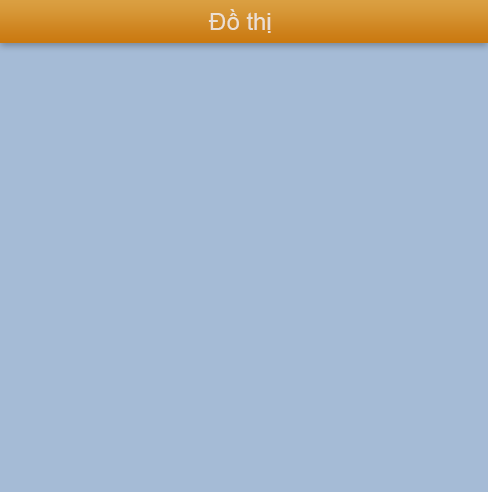
<style>
.page{position:relative;width:488px;height:492px;background:#a5bbd6}
.page>*{position:absolute;margin:0}
.t1{font:24px "ArialMT";color:#ebdfd4}
</style>
<div class="page">
<p class="t1" style="left:208px;top:9px;width:63px;height:24px">Đồ thị</p>
</div>
